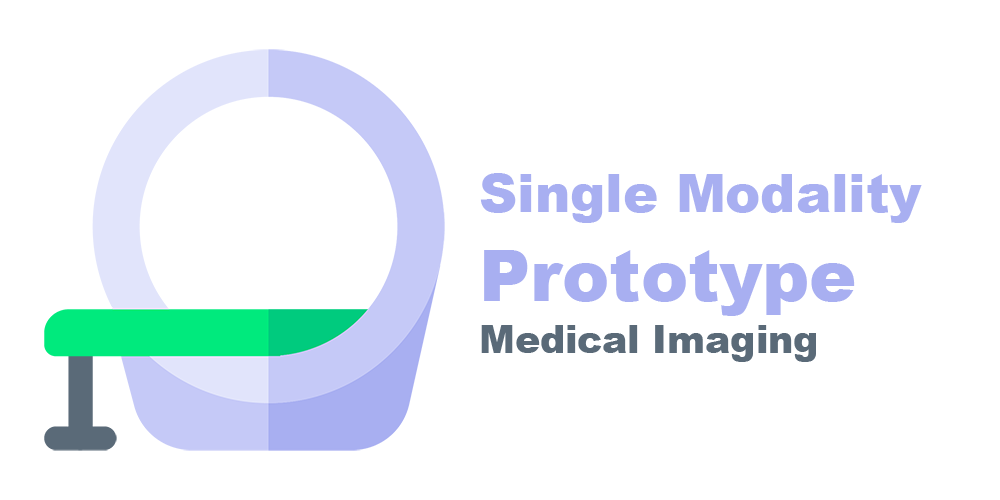
<style>
.page{position:relative;width:1000px;height:500px;background:#ffffff}
.page>*{position:absolute;margin:0}
.t1{font:52.7px "Arial-Black";color:#a8aff1}
.t2{font:70.5px "Arial-Black";color:#a8aff1}
.t3{font:37.6px "Arial-Black";color:#5a6a78}
</style>
<div class="page">
<p class="t1" style="left:480px;top:173px;width:442px;height:50px">Single Modality</p>
<p class="t2" style="left:484px;top:250px;width:371px;height:66px">Prototype</p>
<p class="t3" style="left:481px;top:325px;width:335px;height:37px">Medical Imaging</p>
</div>
